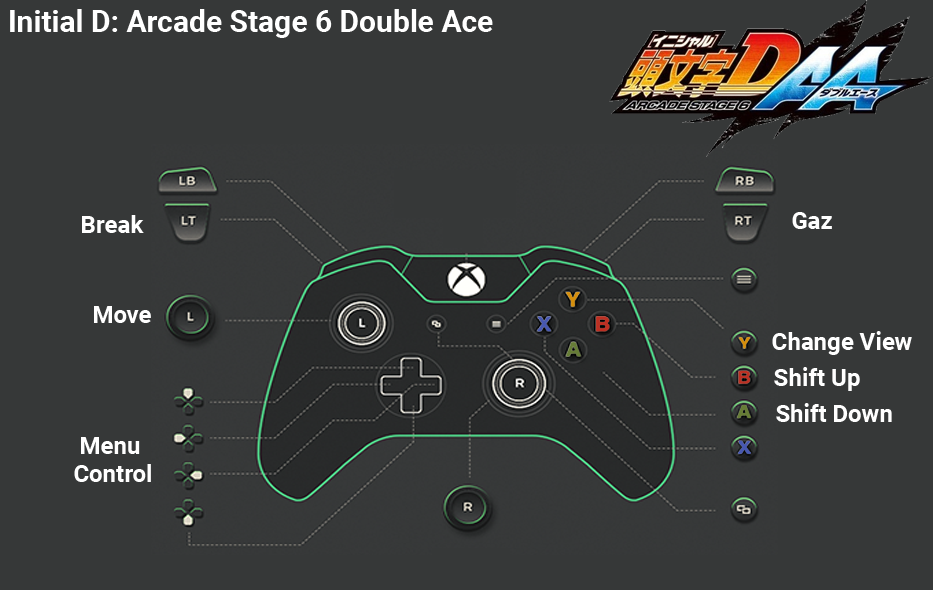
<style>
.page{position:relative;width:933px;height:590px;background:#363838}
.page>*{position:absolute;margin:0}
.t1{font:30px "Roboto-Bold";color:#ffffff}
.t2{font:24px "Roboto-Bold";color:#ffffff}
.t3{font:24px/28px "Roboto-Bold";color:#ffffff}
</style>
<div class="page">
<p class="t1" style="left:10px;top:9px;width:483px;height:29px">Initial D: Arcade Stage 6 Double Ace</p>
<p class="t2" style="left:82px;top:215px;width:62px;height:18px">Break</p>
<p class="t2" style="left:792px;top:212px;width:40px;height:17px">Gaz</p>
<p class="t2" style="left:94px;top:306px;width:57px;height:17px">Move</p>
<p class="t2" style="left:772px;top:331px;width:140px;height:24px">Change View</p>
<p class="t2" style="left:774px;top:367px;width:86px;height:24px">Shift Up</p>
<p class="t2" style="left:776px;top:403px;width:116px;height:19px">Shift Down</p>
<p class="t3" style="left:74px;top:437px;width:77px;height:45px;text-align:center">Menu <br>Control</p>
</div>
